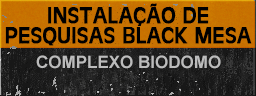
<style>
.page{position:relative;width:256px;height:96px}
.page>*{position:absolute;margin:0}
.t1{font:24px/20px "Antique-Olive";color:#000000;font-weight:bold;scale:0.94 1}
.t2{font:17px "Arial-BoldMT";color:#bcbcbc}
</style>
<div class="page">
<p class="t1" style="left:5px;top:3px;width:247px;height:43px;text-align:center">INSTALAÇÃO DE<br>PESQUISAS BLACK MESA</p>
<p class="t2" style="left:36px;top:55px;width:185px;height:14px">COMPLEXO BIODOMO</p>
</div>
